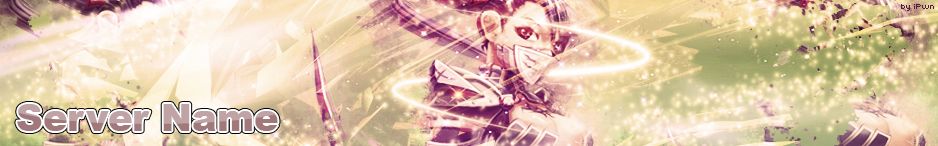
<style>
.page{position:relative;width:938px;height:146px}
.page>*{position:absolute;margin:0}
.t1{font:37px "Arial-Black"}
</style>
<div class="page">
<p class="t1" style="left:17px;top:104px;width:261px;height:27px">Server Name</p>
<p class="t1" style="left:17px;top:104px;width:261px;height:27px">Server Name</p>
</div>
